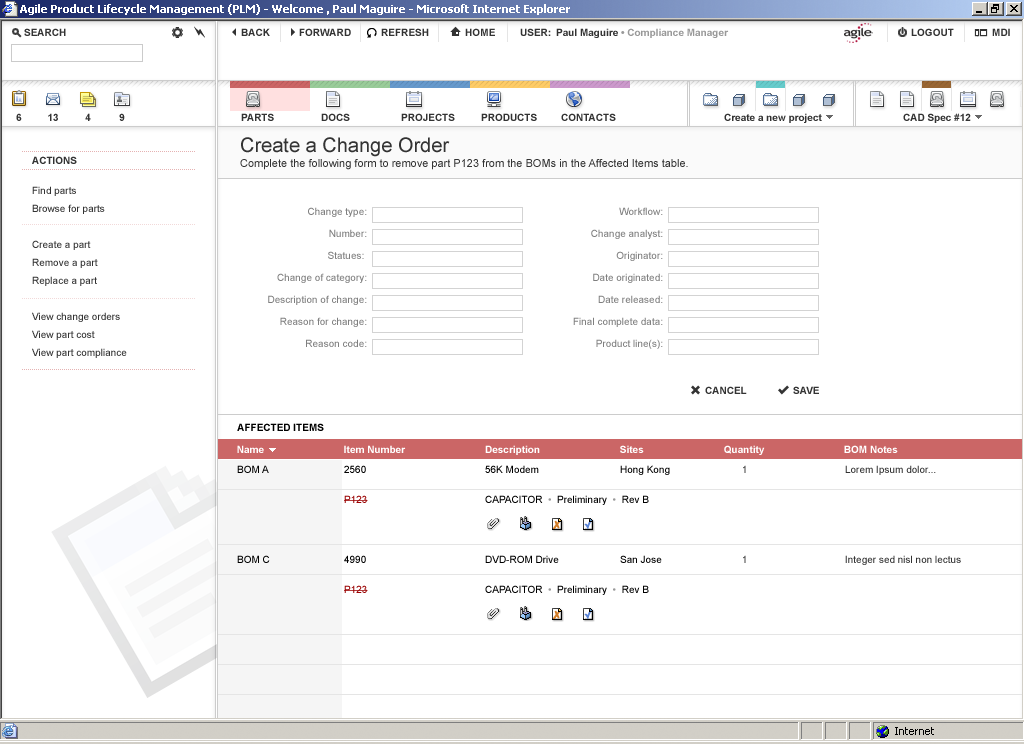
<style>
.page{position:relative;width:1024px;height:744px;background:#ffffff}
.page>*{position:absolute;margin:0}
.t1{font:20px "ArialMT";color:#333333}
.t2{font:10px "Arial-BoldMT";color:#333333}
.t3{font:11px "ArialMT";color:#333333}
.t4{font:10px/18px "ArialMT";color:#333333}
.t5{font:10px/22px "ArialMT";color:#7f7f7f}
.t6{font:10px "Arial-BoldMT";color:#000000}
.t7{font:10px "Arial-BoldMT";color:#ffffff}
.t8{font:10px/10px "ArialMT";color:#000000}
.t9{font:10px/10px "ArialMT";color:#990000}
.t10{font:10px/10px "ArialMT";color:#999999}
.t11{font:10px/10px "ArialMT"}
.t12{font:10px/10px "ArialMT";color:#333333}
</style>
<div class="page">
<p class="t1" style="left:241px;top:137px;width:209px;height:20px">Create a Change Order</p>
<p class="t2" style="left:32px;top:156px;width:45px;height:8px">ACTIONS</p>
<p class="t3" style="left:240px;top:159px;width:448px;height:11px">Complete the following form to remove part P123 from the BOMs in the Affected Items table.</p>
<p class="t4" style="left:32px;top:186px;width:95px;height:172px">Find parts<br>Browse for parts<br><br>Create a part<br>Remove a part<br>Replace a part<br><br>View change orders<br>View part cost<br>View part compliance</p>
<p class="t5" style="left:268px;top:207px;width:99px;height:140px;text-align:right">Change type:<br>Number:<br>Statues: <br>Change of category:<br>Description of change:<br>Reason for change:<br>Reason code:</p>
<p class="t5" style="left:573px;top:207px;width:90px;height:142px;text-align:right">Workflow:<br>Change analyst:<br>Originator:<br>Date originated:<br>Date released:<br>Final complete data:<br>Product line(s):</p>
<p class="t2" style="left:705px;top:386px;width:42px;height:8px">CANCEL</p>
<p class="t2" style="left:793px;top:386px;width:26px;height:8px">SAVE</p>
<p class="t6" style="left:237px;top:423px;width:87px;height:8px">AFFECTED ITEMS</p>
<p class="t7" style="left:237px;top:445px;width:27px;height:8px">Name</p>
<p class="t7" style="left:344px;top:445px;width:62px;height:8px">Item Number</p>
<p class="t7" style="left:485px;top:445px;width:55px;height:10px">Description</p>
<p class="t7" style="left:620px;top:445px;width:24px;height:8px">Sites</p>
<p class="t7" style="left:724px;top:445px;width:41px;height:10px">Quantity</p>
<p class="t7" style="left:844px;top:445px;width:54px;height:8px">BOM Notes</p>
<p class="t8" style="left:237px;top:465px;width:33px;height:98px">BOM A<br><br><br><br><br><br><br><br><br>BOM C</p>
<p class="t8" style="left:344px;top:465px;width:24px;height:128px">2560<br><br><br><span class="t9">P123<br><br><br><br></span><br><br>4990<br><br><br><span class="t9">P123</span></p>
<p class="t8" style="left:485px;top:465px;width:164px;height:130px">56K Modem<br><br><br>CAPACITOR  <span class="t10">•</span>  Preliminary  <span class="t10">•</span>  Rev B<br><br><br><br><br><br>DVD-ROM Drive<br><br><br>CAPACITOR  <span class="t10">•</span>  Preliminary  <span class="t10">•</span>  Rev B</p>
<p class="t8" style="left:620px;top:465px;width:50px;height:98px">Hong Kong<br><br><br><br><br><br><br><br><br>San Jose</p>
<p class="t11" style="left:743px;top:465px;width:3px;height:98px">1<br><br><br><br><br><br><br><br><br>1</p>
<p class="t12" style="left:845px;top:465px;width:116px;height:100px">Lorem Ipsum dolor...<br><br><br><br><br><br><br><br><br>Integer sed nisl non lectus</p>
</div>
